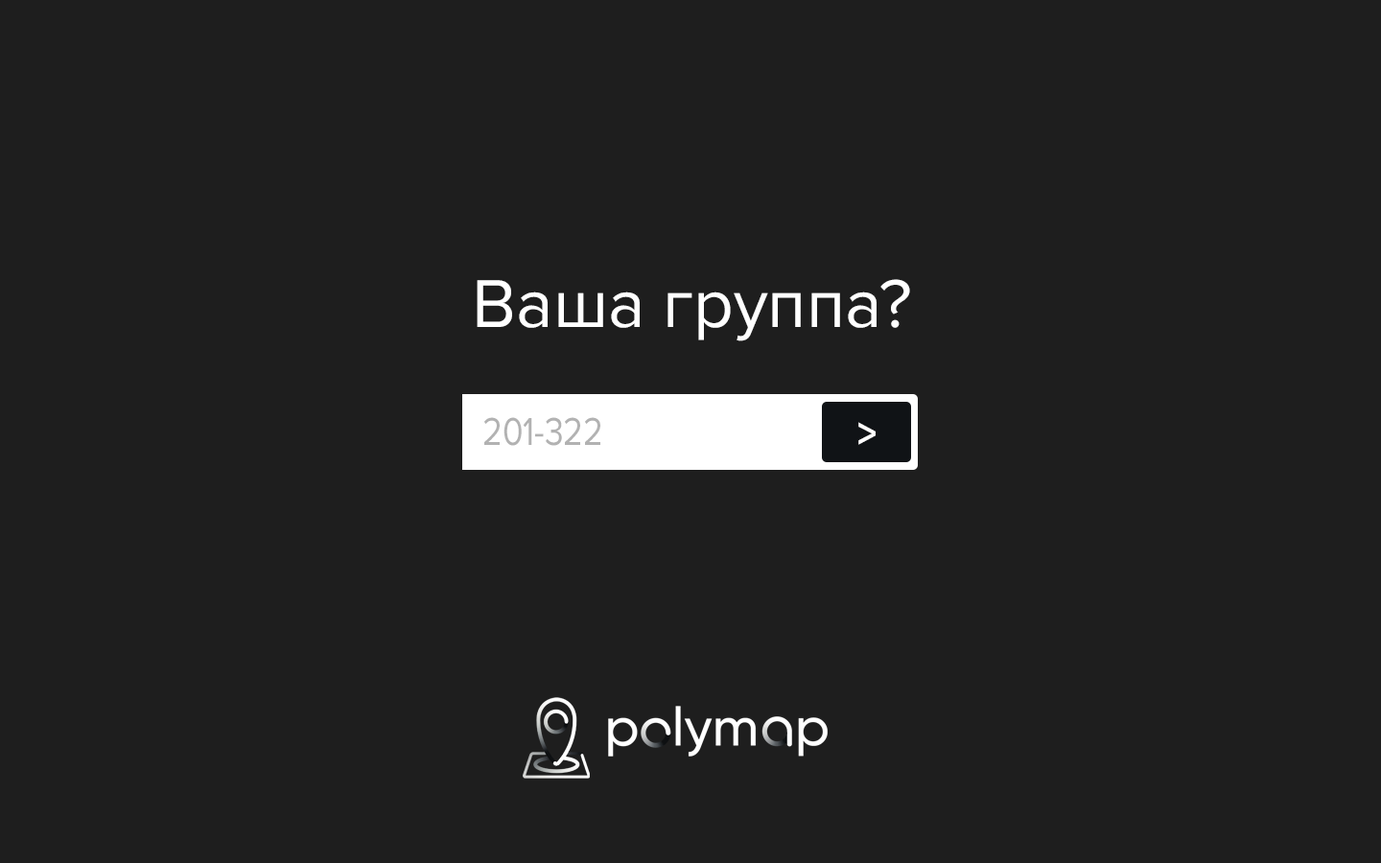
<style>
.page{position:relative;width:1381px;height:863px;background:#1e1e1e}
.page>*{position:absolute;margin:0}
.t1{font:70px "ProximaNova-Regular";color:#ffffff}
.t2{font:40.3px "ProximaNova-Regular";color:#b2b2b2;scale:0.84 1}
.t3{font:45.6px "ProximaNova-Bold";color:#ffffff;scale:0.84 1}
</style>
<div class="page">
<p class="t1" style="left:477px;top:279px;width:433px;height:62px">Ваша группа?</p>
<p class="t2" style="left:484px;top:417px;width:116px;height:29px">201-322</p>
<p class="t3" style="left:858px;top:422px;width:18px;height:23px">&gt;</p>
</div>
